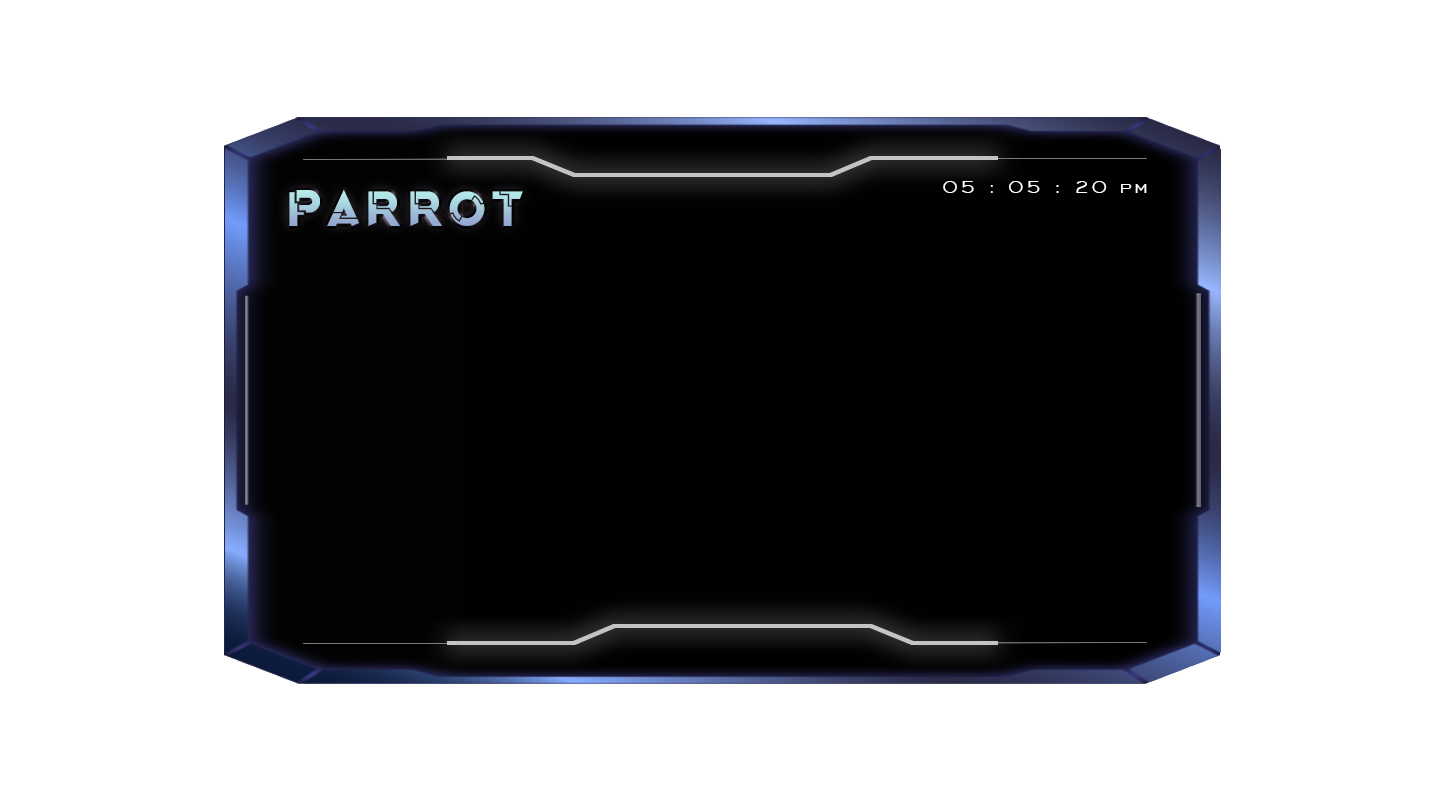
<style>
.page{position:relative;width:1444px;height:800px;background:#ffffff}
.page>*{position:absolute;margin:0}
.t1{font:22.8px "EngraversGothicBT-Regular";letter-spacing:0.111em;color:#ffffff}
.t2{font:51.5px "OriginTechDemoRegular";letter-spacing:0.111em}
</style>
<div class="page">
<p class="t1" style="left:943px;top:181px;width:204px;height:12px">05 : 05 : 20 pm</p>
<p class="t2" style="left:289px;top:189px;width:234px;height:37px">Parrot</p>
</div>
